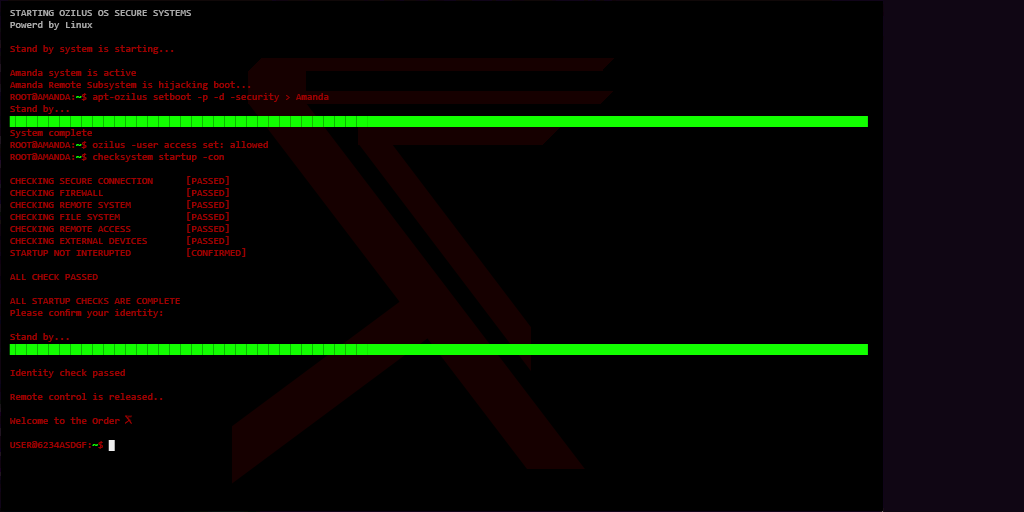
<style>
.page{position:relative;width:1024px;height:512px;background:#000000}
.page>*{position:absolute;margin:0}
.t1{font:10px "Consolas";color:#9c0000;text-transform:uppercase}
.t2{font:10px "Consolas";color:#a9a9a9;text-transform:uppercase}
.t3{font:10px "Consolas";color:#a9a9a9}
.t4{font:10px "Consolas";color:#9c0000}
.t5{font:10px "Consolas";color:#12ff00;text-transform:uppercase}
.t6{font:10px "Consolas";color:#f0f0f0;text-transform:uppercase}
</style>
<div class="page">
<p class="t1" style="left:9px;top:10px;width:859px;height:441px;text-align:justify"><span class="t2">Starting oziLus OS Secure systems<br></span><span class="t3">Powerd by Linux<br><br></span><span class="t4">Stand by system is starting...<br><br>Amanda system is active <br>Amanda Remote Subsystem is hijacking boot...<br></span>Root@AMANDA:<span class="t5">~</span>$<span class="t4"> apt-ozilus setboot -p -d -security &gt; Amanda<br>Stand by...<br></span><span class="t5">████████████████████████████████████████████████████████████████████████████████████████████████████████████████████████████████████████████████████████████<br></span><span class="t4">System complete<br></span>Root@AMANDA:<span class="t5">~</span>$<span class="t4"> ozilus -user access set: allowed<br></span>Root@AMANDA:<span class="t5">~</span>$<span class="t4"> checksystem startup -con<br><br></span>CHECKING SECURE connection      [PASSED]<br>Checking firewall               [PASSED]<br>CHECKING REMOTE SYSTEM          [PASSED]<br>CHECKING FILE SYSTEM            [PASSED]<br>CHECKING REMOTE ACCESS          [PASSED]<br>CHECKING EXTERNAL DEVICES       [PASSED]<br>Startup Not interupted          [CONFIRMED]<br><br>All Check passed<br><br>All startup checks are completE<br><span class="t4">Please confirm your identity: <br><br>Stand by...<br></span><span class="t5">████████████████████████████████████████████████████████████████████████████████████████████████████████████████████████████████████████████████████████████<br></span><span class="t4"><br>Identity check passed<br><br>Remote control is released..<br><br>Welcome to the Order<br><br></span>user@6234ASDGF:<span class="t5">~</span>$ <span class="t6">█</span></p>
</div>
